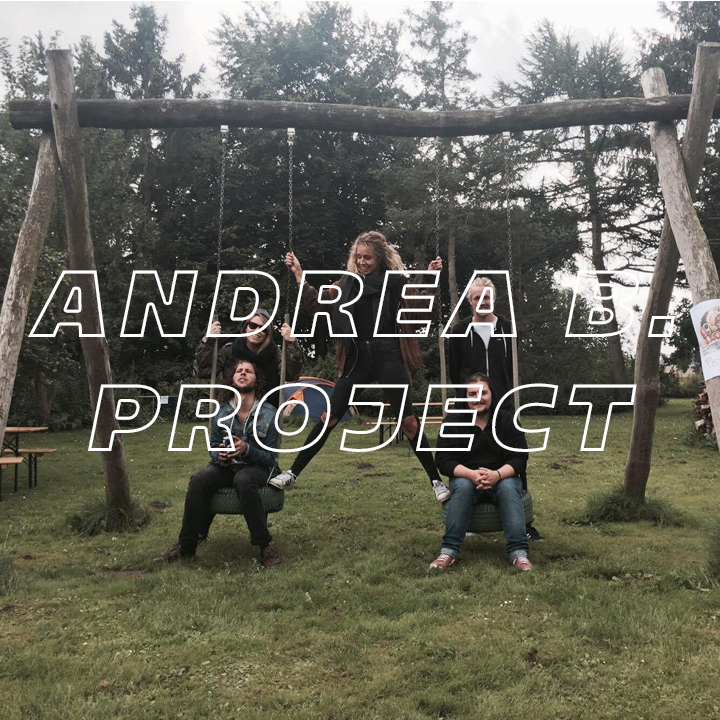
<style>
.page{position:relative;width:720px;height:720px}
.page>*{position:absolute;margin:0}
.t1{font:95px "Majoris-Italic";letter-spacing:0.1em;text-transform:uppercase}
</style>
<div class="page">
<p class="t1" style="left:28px;top:270px;width:647px;height:183px;text-align:center">andrea b.<br>project</p>
</div>
